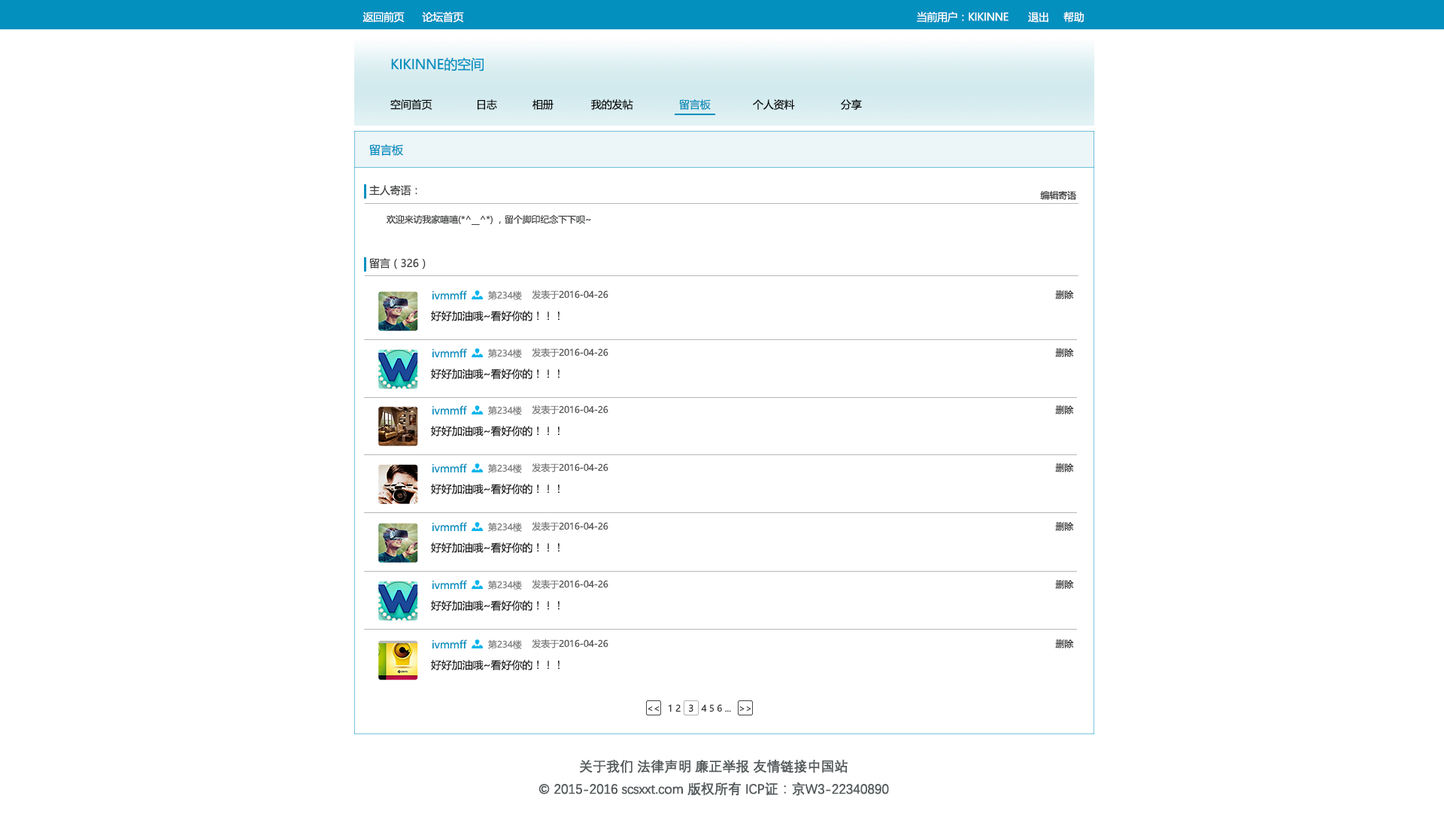
<style>
.page{position:relative;width:1444px;height:826px;background:#ffffff}
.page>*{position:absolute;margin:0}
.t1{font:10.5px "MicrosoftYaHei";letter-spacing:-0.025em;color:#ffffff}
.t2{font:13.5px "MicrosoftYaHei";letter-spacing:-0.01em;color:#0390bf}
.t3{font:10.5px "MicrosoftYaHei";letter-spacing:-0.01em;color:#111111}
.t4{font:10.5px "MicrosoftYaHei";letter-spacing:-0.01em;color:#040404}
.t5{font:10.5px "MicrosoftYaHei";letter-spacing:-0.01em;color:#068cb8}
.t6{font:11.4px "MicrosoftYaHei";letter-spacing:-0.01em;color:#0390bf}
.t7{font:10.5px "MicrosoftYaHei";letter-spacing:-0.01em;color:#404141}
.t8{font:9px "MicrosoftYaHei";letter-spacing:-0.01em;color:#2e2d2d}
.t9{font:9px "MicrosoftYaHei";letter-spacing:-0.01em;color:#404141}
.t10{font:10.5px "MicrosoftYaHei";letter-spacing:-0.01em;color:#0390bf}
.t11{font:9px "MicrosoftYaHei";letter-spacing:-0.01em;color:#7f7d7d}
.t12{font:9px "MicrosoftYaHei";letter-spacing:-0.01em;color:#535353}
.t13{font:9px "MicrosoftYaHei";letter-spacing:-0.01em;color:#7a7a7a}
.t14{font:10.5px "MicrosoftYaHei";letter-spacing:-0.01em;color:#1a1a1a}
.t15{font:9px "MicrosoftYaHei";letter-spacing:-0.01em;color:#38393a}
.t16{font:9px "MicrosoftYaHei";letter-spacing:-0.01em;color:#252626}
.t17{font:13.5px/22.6px "DengXian-Regular";letter-spacing:-0.025em;color:#545a5c;font-weight:bold}
</style>
<div class="page">
<p class="t1" style="left:363px;top:11px;width:42px;height:12px">返回前页</p>
<p class="t1" style="left:422px;top:11px;width:42px;height:12px">论坛首页</p>
<p class="t1" style="left:917px;top:11px;width:92px;height:12px">当前用户：KIKINNE</p>
<p class="t1" style="left:1028px;top:12px;width:20px;height:11px">退出</p>
<p class="t1" style="left:1063px;top:11px;width:21px;height:12px">帮助</p>
<p class="t2" style="left:391px;top:57px;width:93px;height:14px">KIKINNE的空间</p>
<p class="t3" style="left:390px;top:99px;width:42px;height:11px">空间首页</p>
<p class="t4" style="left:478px;top:99px;width:19px;height:11px">日志</p>
<p class="t4" style="left:532px;top:99px;width:22px;height:11px">相册</p>
<p class="t4" style="left:591px;top:99px;width:42px;height:11px">我的发帖</p>
<p class="t5" style="left:679px;top:99px;width:32px;height:11px">留言板</p>
<p class="t4" style="left:753px;top:99px;width:42px;height:11px">个人资料</p>
<p class="t4" style="left:841px;top:99px;width:21px;height:11px">分享</p>
<p class="t6" style="left:369px;top:144px;width:34px;height:12px">留言板</p>
<p class="t7" style="left:369px;top:185px;width:48px;height:11px">主人寄语：</p>
<p class="t8" style="left:1040px;top:190px;width:36px;height:10px">编辑寄语</p>
<p class="t9" style="left:387px;top:214px;width:204px;height:11px">欢迎来访我家嘻嘻(*^__^*) ，留个脚印纪念下下呗~</p>
<p class="t7" style="left:369px;top:258px;width:57px;height:11px">留言（326）</p>
<p class="t10" style="left:432px;top:290px;width:35px;height:9px">ivmmff</p>
<p class="t11" style="left:488px;top:290px;width:34px;height:10px">第234楼</p>
<p class="t12" style="left:532px;top:290px;width:76px;height:9px"><span class="t13"> 发表于</span>2016-04-26</p>
<p class="t8" style="left:1055px;top:290px;width:19px;height:9px">删除</p>
<p class="t14" style="left:431px;top:311px;width:129px;height:10px">好好加油哦~看好你的！！！</p>
<p class="t10" style="left:432px;top:348px;width:35px;height:9px">ivmmff</p>
<p class="t11" style="left:488px;top:348px;width:34px;height:10px">第234楼</p>
<p class="t12" style="left:532px;top:347px;width:76px;height:10px"><span class="t13"> 发表于</span>2016-04-26</p>
<p class="t8" style="left:1055px;top:347px;width:19px;height:10px">删除</p>
<p class="t14" style="left:431px;top:369px;width:129px;height:10px">好好加油哦~看好你的！！！</p>
<p class="t10" style="left:432px;top:405px;width:35px;height:9px">ivmmff</p>
<p class="t11" style="left:488px;top:405px;width:34px;height:10px">第234楼</p>
<p class="t12" style="left:532px;top:405px;width:76px;height:9px"><span class="t13"> 发表于</span>2016-04-26</p>
<p class="t8" style="left:1055px;top:405px;width:19px;height:9px">删除</p>
<p class="t14" style="left:431px;top:426px;width:129px;height:10px">好好加油哦~看好你的！！！</p>
<p class="t10" style="left:432px;top:463px;width:35px;height:9px">ivmmff</p>
<p class="t11" style="left:488px;top:463px;width:34px;height:10px">第234楼</p>
<p class="t12" style="left:532px;top:463px;width:76px;height:9px"><span class="t13"> 发表于</span>2016-04-26</p>
<p class="t8" style="left:1055px;top:463px;width:19px;height:9px">删除</p>
<p class="t14" style="left:431px;top:484px;width:129px;height:10px">好好加油哦~看好你的！！！</p>
<p class="t10" style="left:432px;top:522px;width:35px;height:9px">ivmmff</p>
<p class="t11" style="left:488px;top:522px;width:34px;height:10px">第234楼</p>
<p class="t12" style="left:532px;top:521px;width:76px;height:10px"><span class="t13"> 发表于</span>2016-04-26</p>
<p class="t8" style="left:1055px;top:521px;width:19px;height:10px">删除</p>
<p class="t14" style="left:431px;top:542px;width:129px;height:11px">好好加油哦~看好你的！！！</p>
<p class="t10" style="left:432px;top:580px;width:35px;height:9px">ivmmff</p>
<p class="t11" style="left:488px;top:580px;width:34px;height:10px">第234楼</p>
<p class="t12" style="left:532px;top:579px;width:76px;height:10px"><span class="t13"> 发表于</span>2016-04-26</p>
<p class="t8" style="left:1055px;top:579px;width:19px;height:10px">删除</p>
<p class="t14" style="left:431px;top:600px;width:129px;height:11px">好好加油哦~看好你的！！！</p>
<p class="t10" style="left:432px;top:639px;width:35px;height:9px">ivmmff</p>
<p class="t11" style="left:488px;top:639px;width:34px;height:10px">第234楼</p>
<p class="t12" style="left:532px;top:639px;width:76px;height:9px"><span class="t13"> 发表于</span>2016-04-26</p>
<p class="t8" style="left:1055px;top:639px;width:19px;height:9px">删除</p>
<p class="t14" style="left:431px;top:660px;width:129px;height:10px">好好加油哦~看好你的！！！</p>
<p class="t15" style="left:648px;top:704px;width:103px;height:8px">&lt;&lt;   1 2 <span class="t16">  3 </span>  4 5 6 ...   &gt;&gt;</p>
<p class="t17" style="left:538px;top:759px;width:351px;height:37px;text-align:center">关于我们 法律声明 廉正举报 友情链接中国站<br>© 2015-2016 scsxxt.com 版权所有 ICP证：京W3-22340890</p>
</div>
